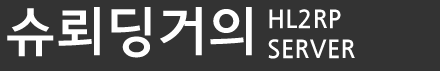
<style>
.page{position:relative;width:440px;height:71px;background:#333333}
.page>*{position:absolute;margin:0}
.t1{font:55px "JejuGothic";color:#ffffff}
.t2{font:25px "JejuGothic";color:#ffffff}
</style>
<div class="page">
<p class="t1" style="left:7px;top:7px;width:245px;height:51px">슈뢰딩거의</p>
<p class="t2" style="left:268px;top:9px;width:87px;height:50px">HL2RP<br>SERVER</p>
</div>
